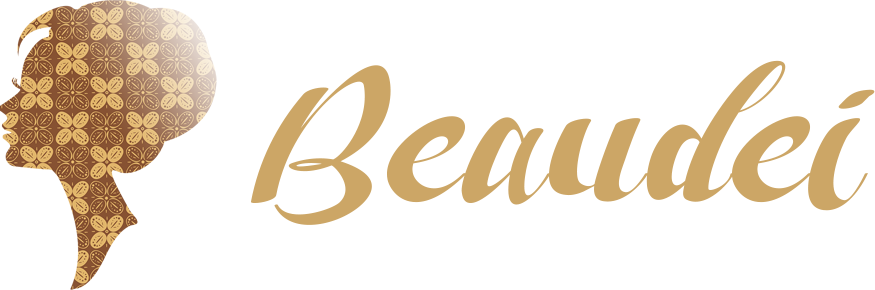
<style>
.page{position:relative;width:875px;height:290px;background:#ffffff}
.page>*{position:absolute;margin:0}
.t1{font:185.3px "FreesiaFlower";letter-spacing:0.01em;color:#cca666}
</style>
<div class="page">
<p class="t1" style="left:251px;top:60px;width:624px;height:165px">Beaudei</p>
</div>
